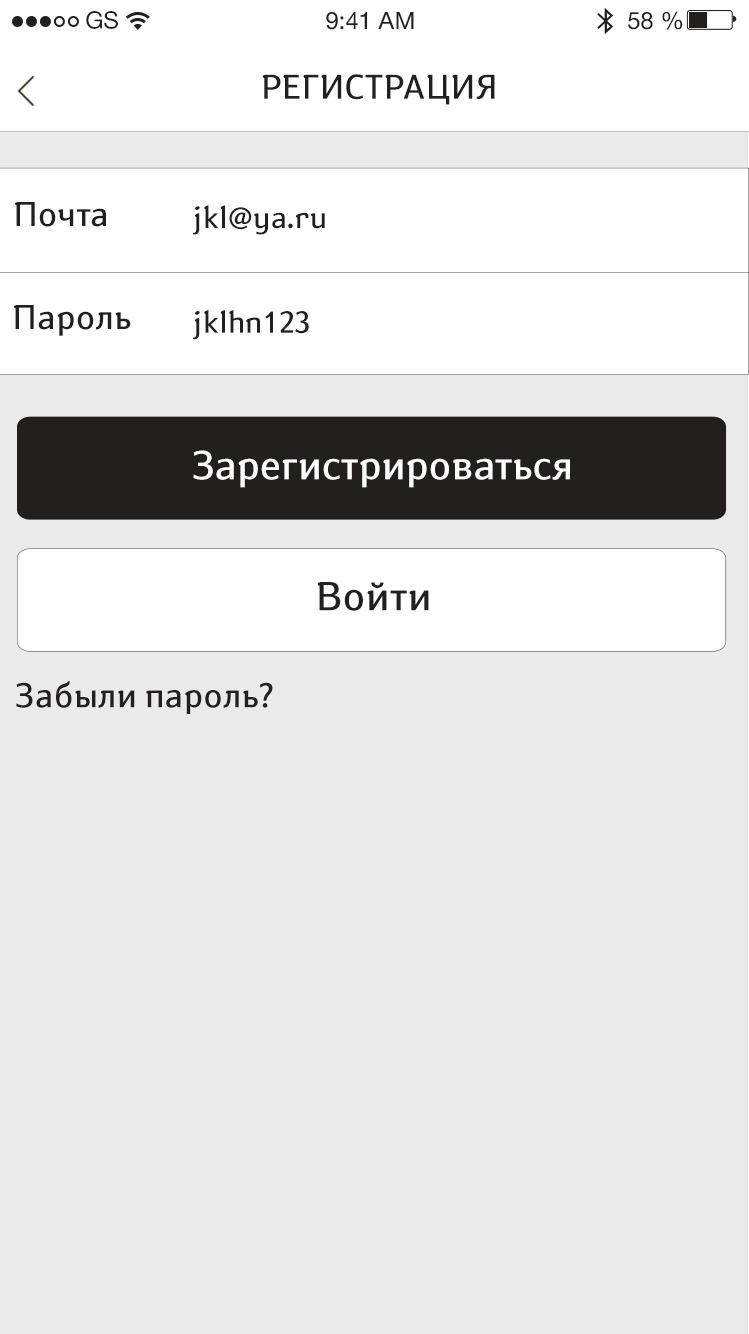
<style>
.page{position:relative;width:749px;height:1334px;background:#eaeaea}
.page>*{position:absolute;margin:0}
.t1{font:24px "HelveticaNeueCyr-Roman";color:#221f1e}
.t2{font:34px "SusanBook-Regular";color:#221f1e}
.t3{font:30px "SusanBook-Regular";color:#221f1e}
.t4{font:40px "SusanBook-Regular";color:#ffffff}
.t5{font:40px "SusanBook-Regular";color:#221f1e}
</style>
<div class="page">
<p class="t1" style="left:86px;top:11px;width:32px;height:18px">GS</p>
<p class="t1" style="left:326px;top:11px;width:88px;height:19px">9:41 AM</p>
<p class="t1" style="left:628px;top:11px;width:55px;height:19px">58 %</p>
<p class="t2" style="left:262px;top:74px;width:233px;height:31px">РЕГИСТРАЦИЯ</p>
<p class="t2" style="left:15px;top:202px;width:91px;height:25px">Почта</p>
<p class="t3" style="left:193px;top:205px;width:132px;height:30px">jkl@ya.ru</p>
<p class="t2" style="left:14px;top:305px;width:117px;height:31px">Пароль</p>
<p class="t3" style="left:193px;top:310px;width:116px;height:30px">jklhn123</p>
<p class="t4" style="left:193px;top:450px;width:377px;height:38px">Зарегистрироваться</p>
<p class="t5" style="left:317px;top:582px;width:112px;height:29px">Войти</p>
<p class="t2" style="left:16px;top:681px;width:257px;height:33px">Забыли пароль?</p>
</div>
